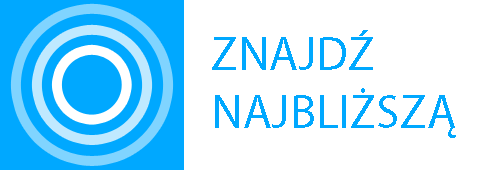
<style>
.page{position:relative;width:484px;height:170px;background:#ffffff}
.page>*{position:absolute;margin:0}
.t1{font:48.3px "MyriadPro-Regular";color:#00a8ff}
</style>
<div class="page">
<p class="t1" style="left:212px;top:30px;width:244px;height:108px">ZNAJDŹ <br>NAJBLIŻSZĄ</p>
</div>
